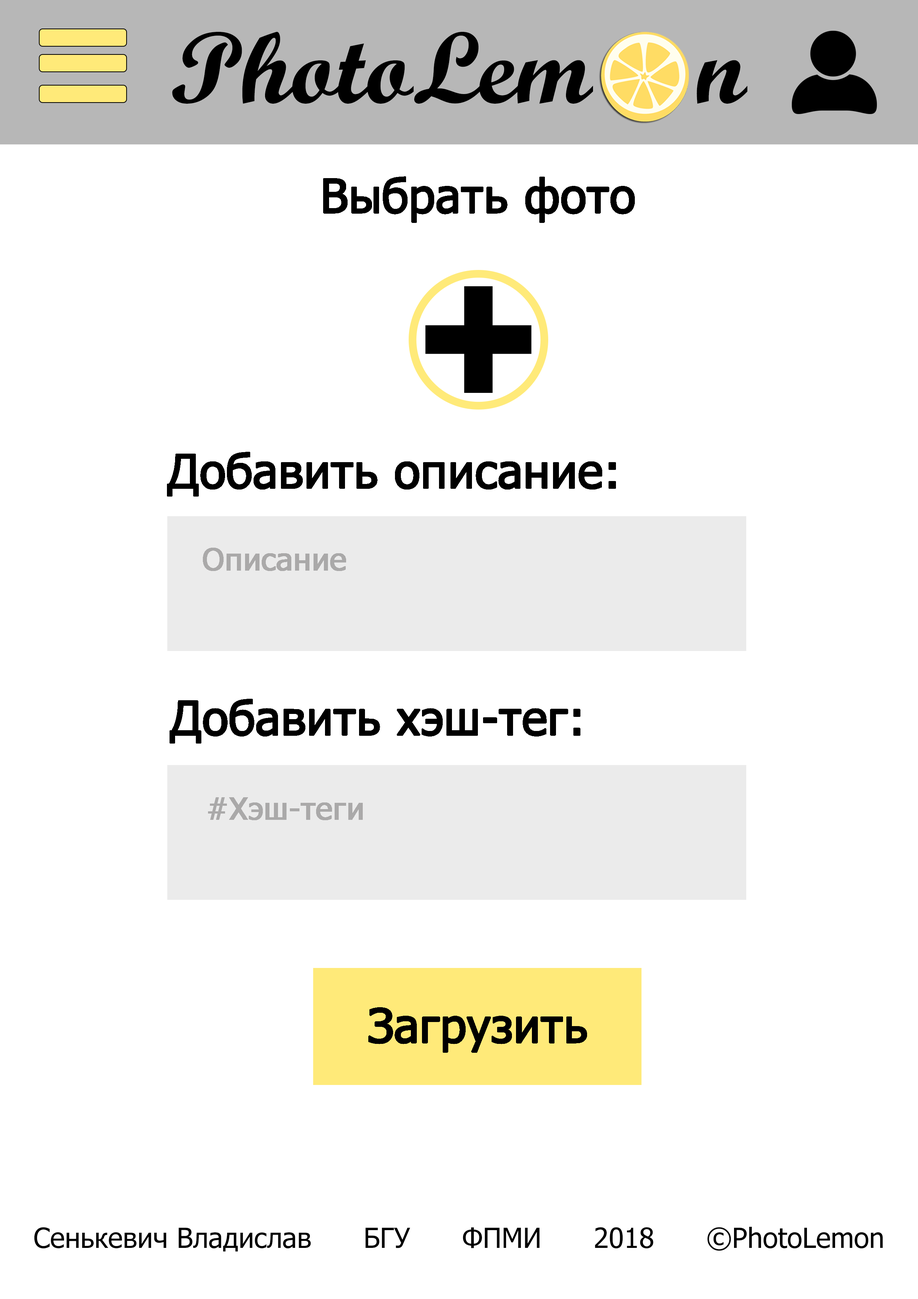
<style>
.page{position:relative;width:918px;height:1299px;background:#ffffff}
.page>*{position:absolute;margin:0}
.t1{font:101.3px "ScriptMTBold";color:#000000;scale:1.03 1}
.t2{font:46.3px "Tahoma";color:#000000;font-weight:bold}
.t3{font:30.9px "Tahoma";color:#aaa9a9;font-weight:bold}
.t4{font:27.8px "Tahoma";color:#000000}
</style>
<div class="page">
<p class="t1" style="left:172px;top:32px;width:575px;height:72px">PhotoLem    n</p>
<p class="t2" style="left:323px;top:176px;width:312px;height:47px">Выбрать фото</p>
<p class="t2" style="left:167px;top:452px;width:449px;height:44px">Добавить описание:</p>
<p class="t3" style="left:203px;top:548px;width:143px;height:23px">Описание</p>
<p class="t2" style="left:170px;top:699px;width:411px;height:44px">Добавить хэш-тег:</p>
<p class="t3" style="left:208px;top:797px;width:155px;height:23px">#Хэш-теги</p>
<p class="t2" style="left:368px;top:1007px;width:219px;height:46px">Загрузить</p>
<p class="t4" style="left:34px;top:1227px;width:849px;height:24px">Сенькевич Владислав      БГУ      ФПМИ      2018      ©PhotoLemon</p>
</div>
